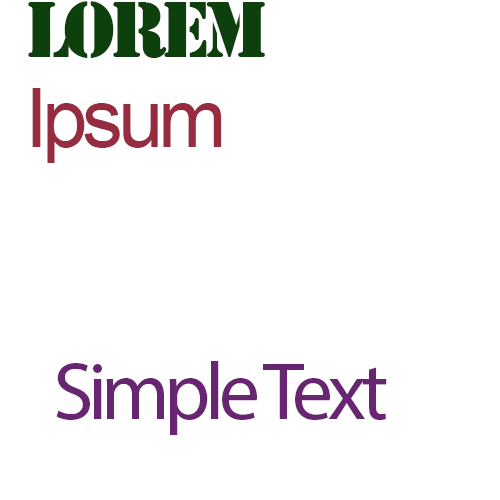
<style>
.page{position:relative;width:500px;height:500px;background:#ffffff}
.page>*{position:absolute;margin:0}
.t1{font:82px/90px "Stencil";letter-spacing:-0.068em;color:#0e400d}
.t2{font:82px/90px "ArialMT";letter-spacing:-0.068em;color:#972b40}
.t3{font:82px "MyriadPro-Regular";letter-spacing:-0.068em;color:#672572}
</style>
<div class="page">
<p class="t1" style="left:28px;top:1px;width:237px;height:162px">Lorem <br><span class="t2">Ipsum</span></p>
<p class="t3" style="left:56px;top:361px;width:331px;height:74px">Simple Text</p>
</div>
